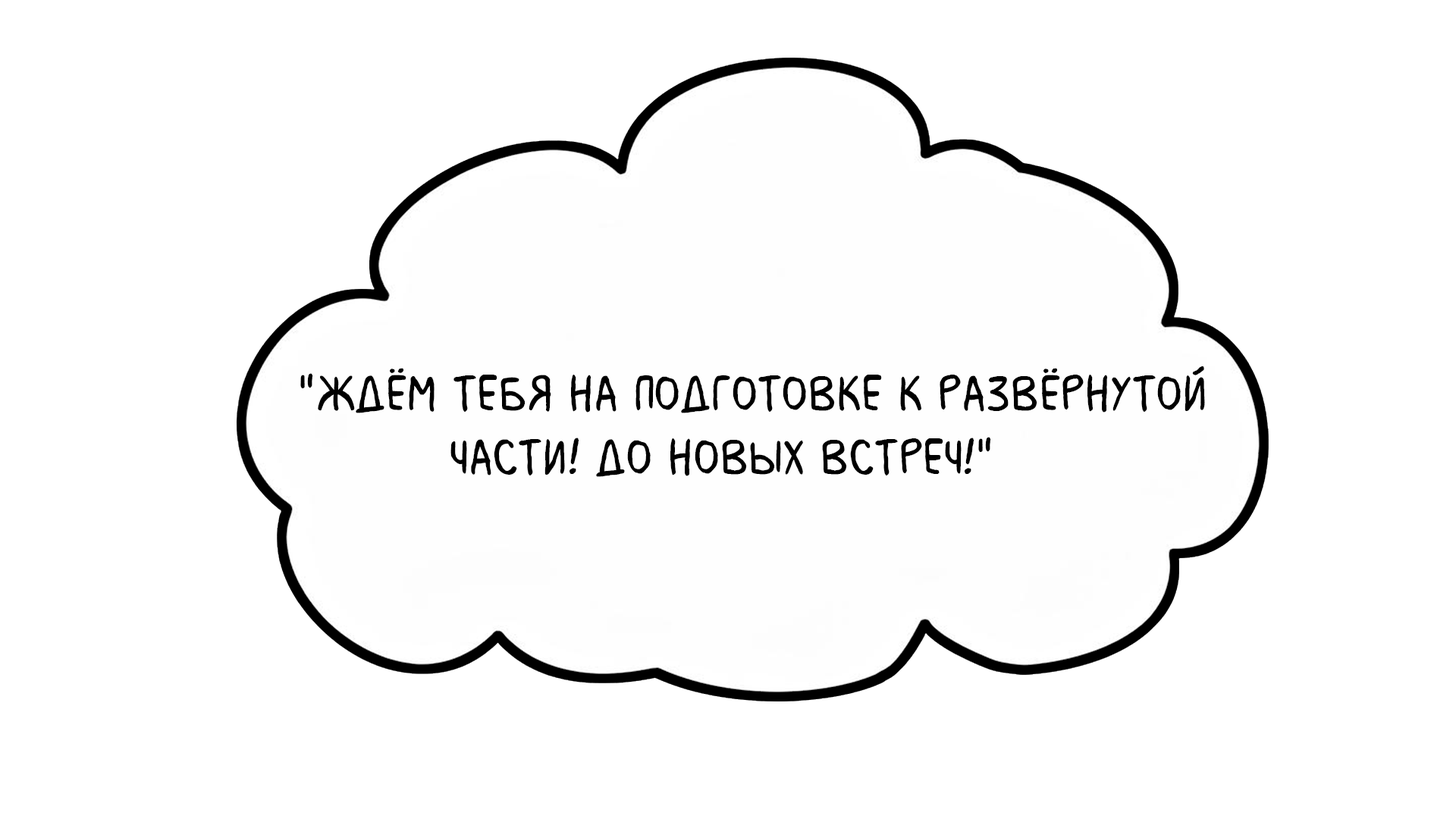
<style>
.page{position:relative;width:1456px;height:819px;background:#ffffff}
.page>*{position:absolute;margin:0}
.t1{font:53.1px "MilkMustacheBB";color:#000000}
</style>
<div class="page">
<p class="t1" style="left:300px;top:366px;width:905px;height:111px">"Ждём тебя на подготовке к развёрнутой <br>          части! До новых встреч!"</p>
</div>
